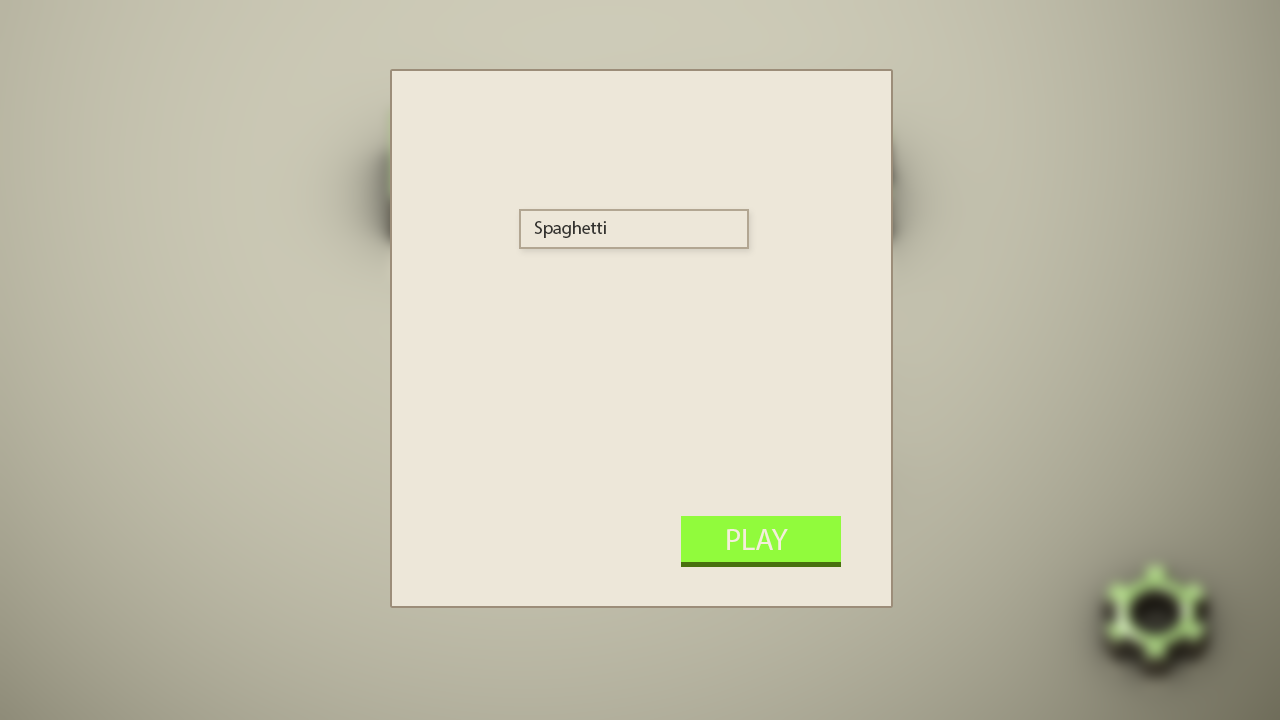
<style>
.page{position:relative;width:1280px;height:720px;background:#ede7d9}
.page>*{position:absolute;margin:0}
.t1{font:18px "MyriadPro-Regular";color:#343330}
.t2{font:30.3px "MyriadPro-Regular";color:#f5eddb}
</style>
<div class="page">
<p class="t1" style="left:534px;top:221px;width:72px;height:17px">Spaghetti</p>
<p class="t2" style="left:727px;top:529px;width:61px;height:21px">PLAY</p>
</div>
